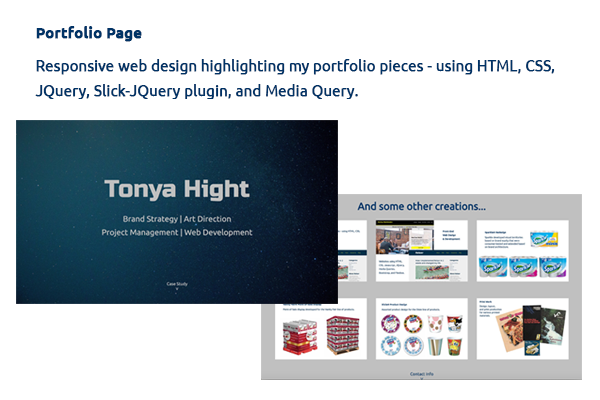
<style>
.page{position:relative;width:600px;height:400px;background:#ffffff}
.page>*{position:absolute;margin:0}
.t1{font:25px/33.3px "Ubuntu";color:#003366;font-weight:bold}
.t2{font:25px/37.5px "Ubuntu-Bold";color:#003366;font-weight:bold}
.t3{font:25px/25px "Ubuntu";color:#003366;font-weight:bold}
</style>
<div class="page">
<p class="t1" style="left:35px;top:26px;width:520px;height:73px"><span class="t2">Portfolio Page<br></span>Responsive web design highlighting my portfolio pieces - using HTML, CSS, <br><span class="t3">JQuery, Slick-JQuery plugin, and Media Query.</span></p>
</div>
